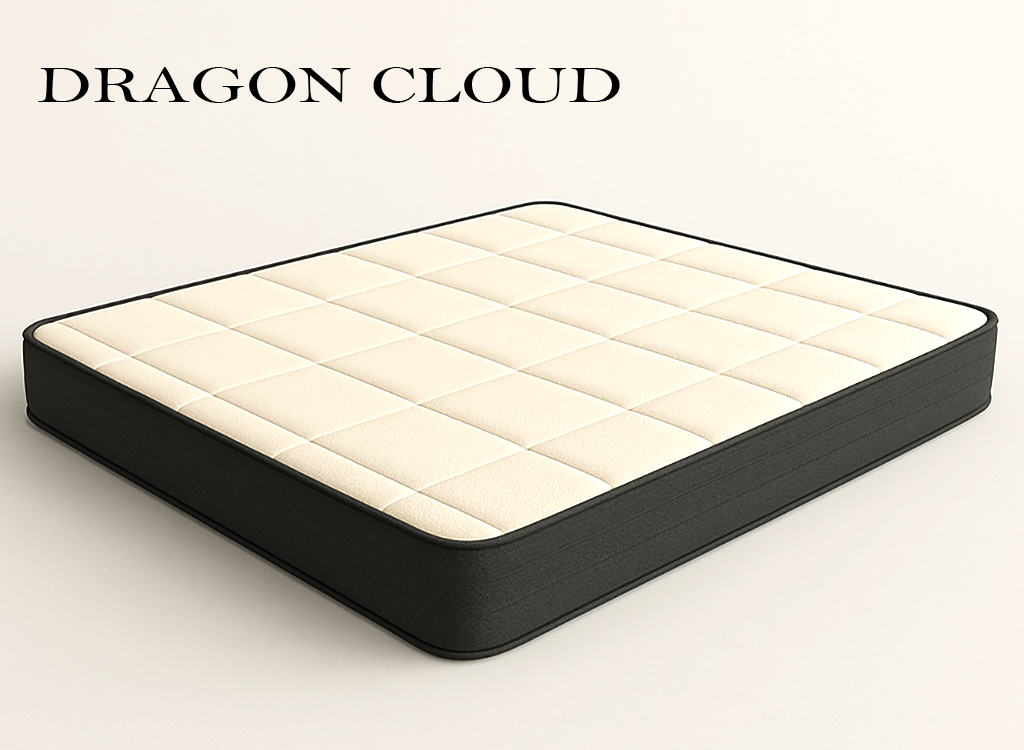
<style>
.page{position:relative;width:1024px;height:750px}
.page>*{position:absolute;margin:0}
.t1{font:52.7px "BellMT";color:#000000;scale:1.37 1}
</style>
<div class="page">
<p class="t1" style="left:37px;top:67px;width:583px;height:36px">DRAGON CLOUD</p>
</div>
